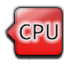
<style>
.page{position:relative;width:64px;height:64px;background:#ffffff}
.page>*{position:absolute;margin:0}
.t1{font:22px "TrebuchetMS-Bold";font-variant:small-caps}
</style>
<div class="page">
<p class="t1" style="left:19px;top:23px;width:39px;height:17px">CPU</p>
</div>
